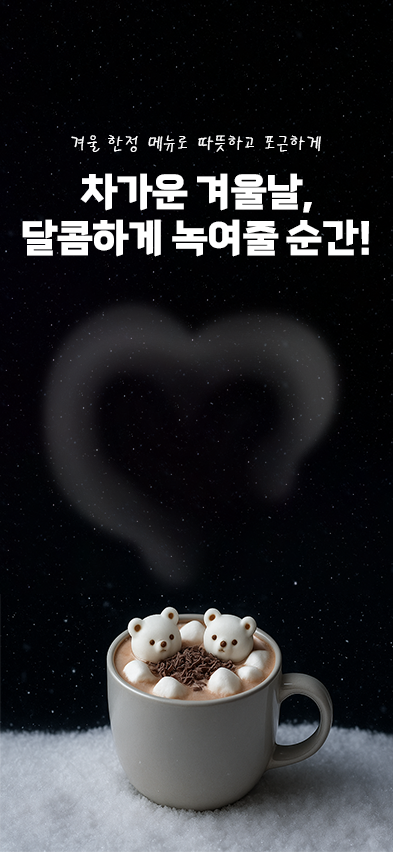
<style>
.page{position:relative;width:393px;height:852px}
.page>*{position:absolute;margin:0}
.t1{font:18.8px "PyunjiR-HM";color:#ffffff}
.t2{font:38.9px/46.4px "TheJamsilOTF6ExtraBold";color:#ffffff}
</style>
<div class="page">
<p class="t1" style="left:71px;top:135px;width:116px;height:17px">겨울 한정 메뉴로</p>
<p class="t1" style="left:198px;top:135px;width:123px;height:17px">따뜻하고 포근하게</p>
<p class="t2" style="left:22px;top:173px;width:347px;height:84px;text-align:center">차가운 겨울날,<br>달콤하게 녹여줄 순간!</p>
</div>
